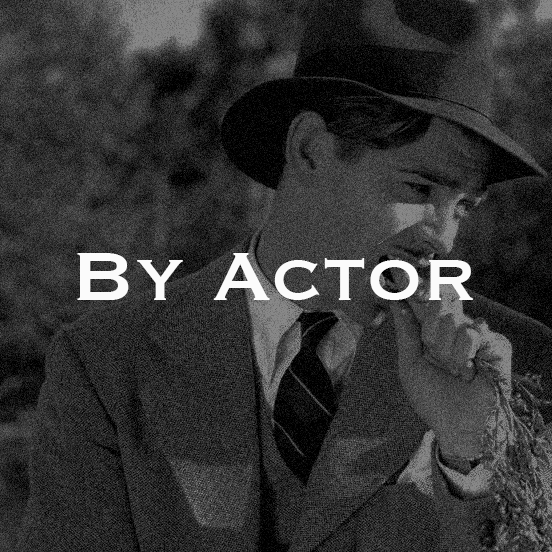
<style>
.page{position:relative;width:552px;height:552px}
.page>*{position:absolute;margin:0}
.t1{font:90px "Copperplate";color:#fbfbfb}
</style>
<div class="page">
<p class="t1" style="left:77px;top:253px;width:396px;height:47px">By Actor</p>
</div>
